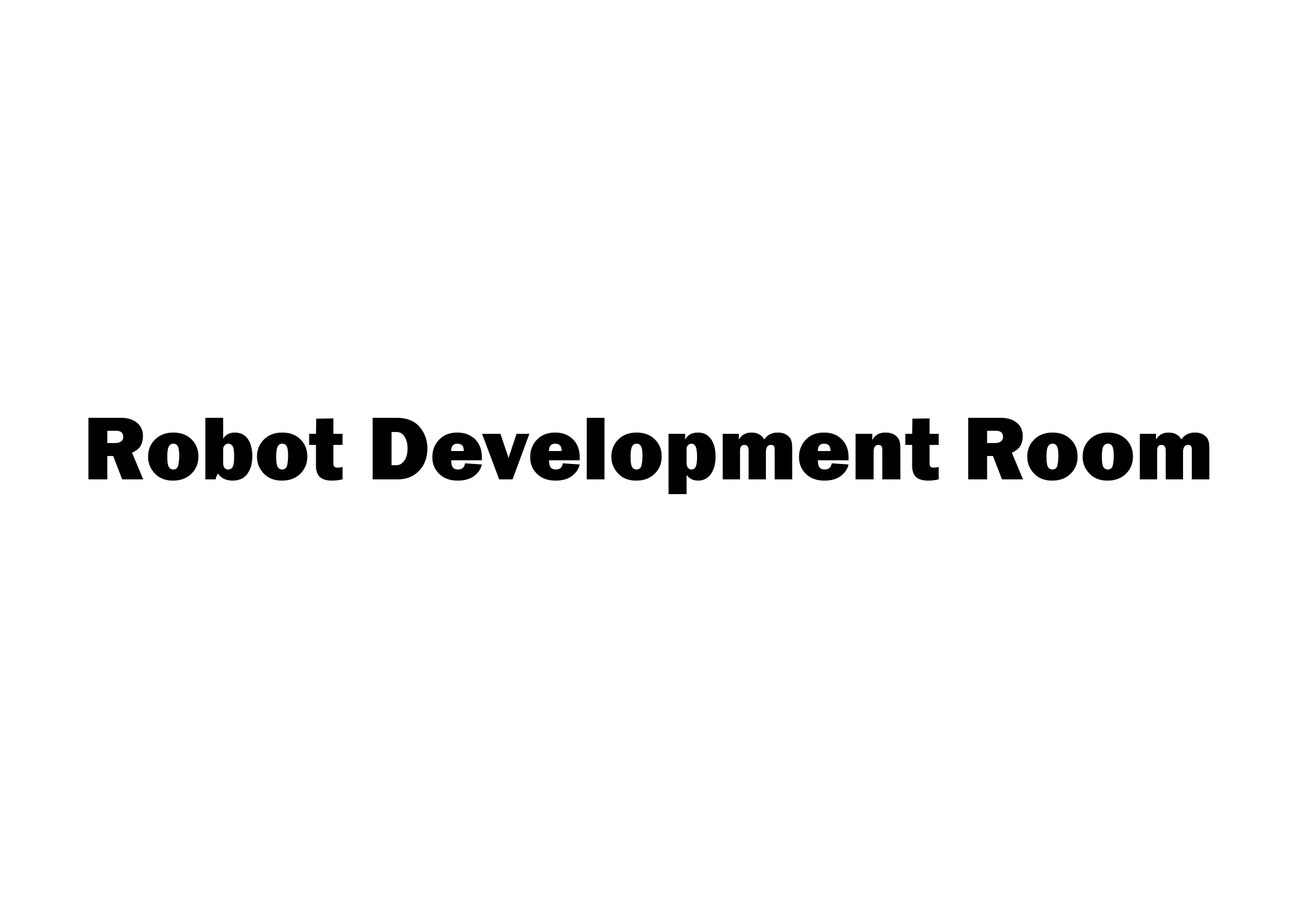
<style>
.page{position:relative;width:1292px;height:923px;background:#ffffff}
.page>*{position:absolute;margin:0}
.t1{font:92.3px "FranklinGothic-Heavy";color:#000000}
</style>
<div class="page">
<p class="t1" style="left:88px;top:418px;width:1122px;height:76px">Robot Development Room</p>
</div>
